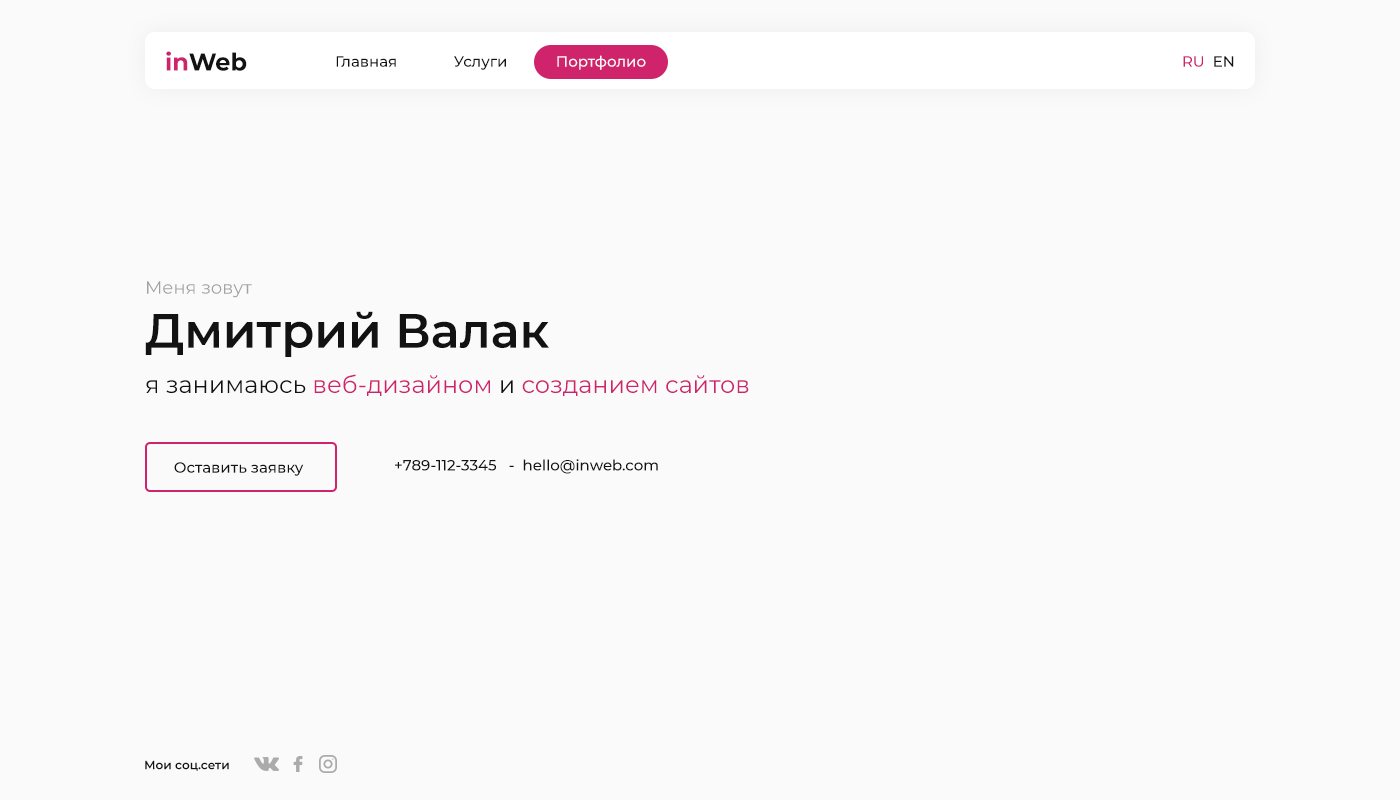
<style>
.page{position:relative;width:1400px;height:800px;background:#fafafa}
.page>*{position:absolute;margin:0}
.t1{font:24px "Montserrat-Bold";color:#121212}
.t2{font:24px "Montserrat-Bold";color:#cf246c}
.t3{font:15px "Montserrat-Medium";color:#121212}
.t4{font:15px "Montserrat-Medium";color:#fafafa}
.t5{font:15px "Montserrat-Medium";color:#cf246c;text-transform:uppercase}
.t6{font:15px "Montserrat-Medium";color:#121212;text-transform:uppercase}
.t7{font:18px "Montserrat-Regular";color:#a1a1a1}
.t8{font:48px "Montserrat-SemiBold";color:#121212}
.t9{font:24px "Montserrat-Regular";color:#cf246c}
.t10{font:24px "Montserrat-Regular";color:#121212}
.t11{font:12px "Montserrat-SemiBold";color:#121212}
</style>
<div class="page">
<p class="t1" style="left:166px;top:51px;width:81px;height:20px"><span class="t2">in</span>Web</p>
<p class="t3" style="left:336px;top:55px;width:310px;height:15px">Главная              Услуги            <span class="t4">Портфолио</span></p>
<p class="t5" style="left:1183px;top:56px;width:51px;height:11px">ru<span class="t6">  en</span></p>
<p class="t7" style="left:147px;top:281px;width:105px;height:17px">Меня зовут</p>
<p class="t8" style="left:145px;top:311px;width:404px;height:46px">Дмитрий Валак</p>
<p class="t9" style="left:146px;top:374px;width:603px;height:22px"><span class="t10">я занимаюсь </span>веб-дизайном <span class="t10">и </span>созданием сайтов</p>
<p class="t3" style="left:174px;top:462px;width:130px;height:14px">Оставить заявку</p>
<p class="t3" style="left:395px;top:459px;width:263px;height:15px">+789-112-3345   -  hello@inweb.com</p>
<p class="t11" style="left:145px;top:760px;width:84px;height:11px">Мои соц.сети</p>
</div>
